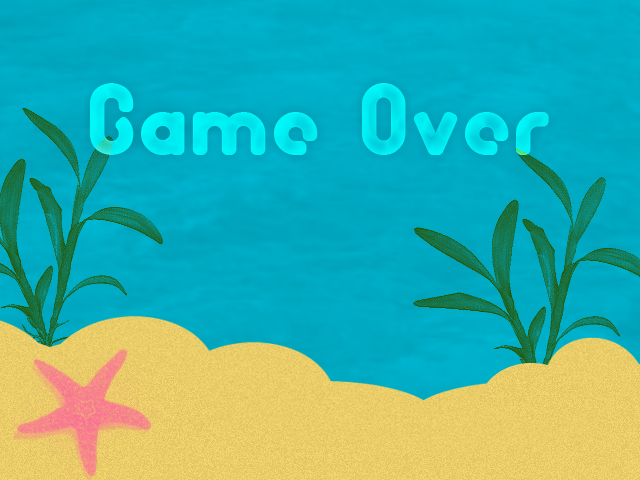
<style>
.page{position:relative;width:640px;height:480px}
.page>*{position:absolute;margin:0}
.t1{font:72px "BubbleClub";color:#00edf2}
</style>
<div class="page">
<p class="t1" style="left:90px;top:83px;width:459px;height:72px">Game Over</p>
</div>
